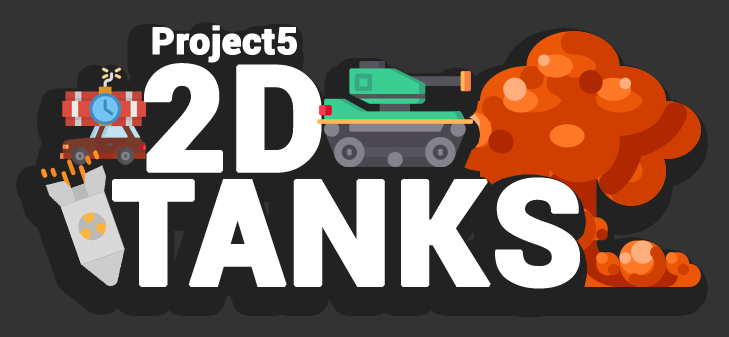
<style>
.page{position:relative;width:729px;height:337px;background:#333333}
.page>*{position:absolute;margin:0}
.t1{font:37px "Roboto-Black";color:#ffffff;font-weight:bold}
.t2{font:146.2px "Roboto-Black";color:#ffffff;font-weight:bold}
</style>
<div class="page">
<p class="t1" style="left:152px;top:25px;width:145px;height:38px">Project5</p>
<p class="t2" style="left:144px;top:63px;width:178px;height:110px">2D</p>
<p class="t2" style="left:112px;top:177px;width:468px;height:112px">TANKS</p>
</div>
